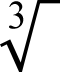
<style>
.page{position:relative;width:60px;height:72px;background:#ffffff}
.page>*{position:absolute;margin:0}
.t1{font:40px "TimesNewRomanPSMT";color:#000000;scale:0.96 1}
</style>
<div class="page">
<p class="t1" style="left:9px;top:1px;width:15px;height:28px">3</p>
</div>
